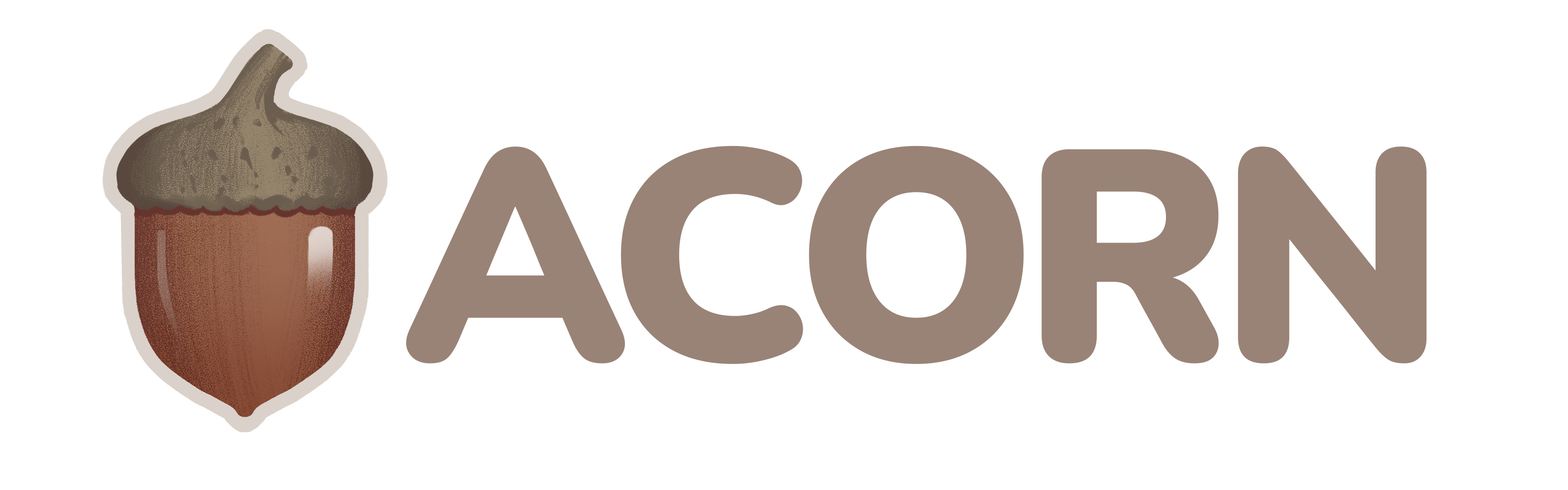
<style>
.page{position:relative;width:1568px;height:490px;background:#ffffff}
.page>*{position:absolute;margin:0}
.t1{font:273.3px "ChironGoRoundTC-Black";color:#998376}
</style>
<div class="page">
<p class="t1" style="left:406px;top:145px;width:1021px;height:219px">ACORN</p>
</div>
